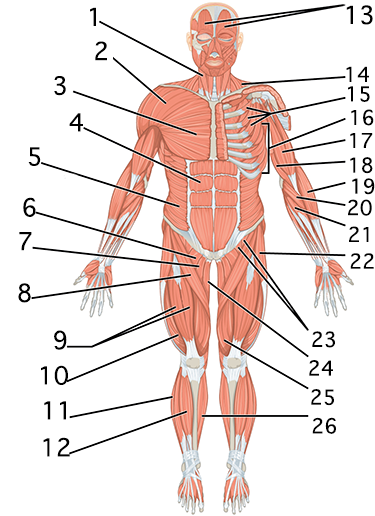
<style>
.page{position:relative;width:375px;height:516px;background:#ffffff}
.page>*{position:absolute;margin:0}
.t1{font:40.6px "Geneva";color:#000000}
.t2{font:33.8px "Geneva";color:#000000}
</style>
<div class="page">
<p class="t1" style="left:346px;top:5px;width:27px;height:20px">13</p>
<p class="t1" style="left:90px;top:7px;width:6px;height:19px">1</p>
<p class="t1" style="left:95px;top:41px;width:12px;height:20px">2</p>
<p class="t1" style="left:54px;top:76px;width:12px;height:20px">3</p>
<p class="t2" style="left:346px;top:66px;width:23px;height:16px">14</p>
<p class="t2" style="left:348px;top:86px;width:22px;height:16px">15</p>
<p class="t1" style="left:69px;top:113px;width:14px;height:19px">4</p>
<p class="t2" style="left:351px;top:109px;width:23px;height:17px">16</p>
<p class="t2" style="left:350px;top:133px;width:23px;height:15px">17</p>
<p class="t1" style="left:28px;top:147px;width:13px;height:19px">5</p>
<p class="t2" style="left:350px;top:157px;width:23px;height:17px">18</p>
<p class="t2" style="left:352px;top:178px;width:23px;height:17px">19</p>
<p class="t1" style="left:23px;top:197px;width:13px;height:20px">6</p>
<p class="t2" style="left:348px;top:199px;width:24px;height:17px">20</p>
<p class="t1" style="left:19px;top:232px;width:13px;height:19px">7</p>
<p class="t2" style="left:349px;top:226px;width:20px;height:16px">21</p>
<p class="t2" style="left:350px;top:253px;width:24px;height:16px">22</p>
<p class="t1" style="left:18px;top:283px;width:13px;height:20px">8</p>
<p class="t1" style="left:54px;top:330px;width:13px;height:20px">9</p>
<p class="t2" style="left:312px;top:331px;width:23px;height:17px">23</p>
<p class="t1" style="left:41px;top:365px;width:27px;height:20px">10</p>
<p class="t2" style="left:309px;top:360px;width:24px;height:16px">24</p>
<p class="t2" style="left:311px;top:389px;width:23px;height:17px">25</p>
<p class="t1" style="left:44px;top:401px;width:22px;height:19px">11</p>
<p class="t2" style="left:312px;top:417px;width:24px;height:17px">26</p>
<p class="t1" style="left:43px;top:437px;width:27px;height:20px">12</p>
</div>
